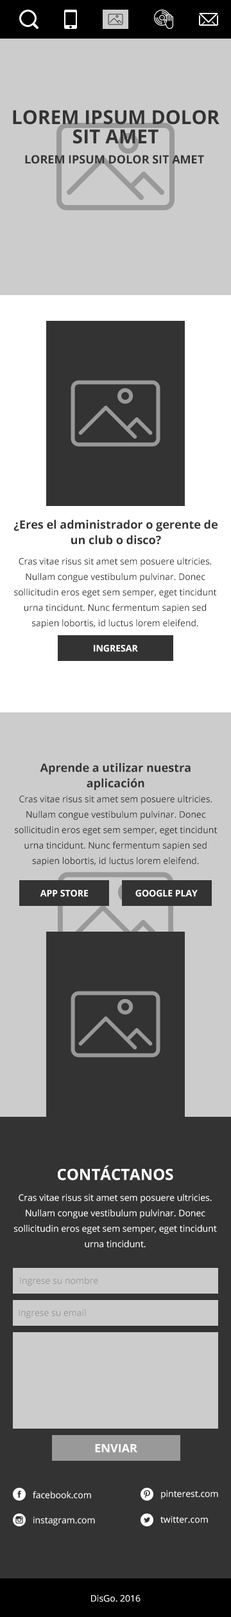
<style>
.page{position:relative;width:231px;height:1617px;background:#cccccc}
.page>*{position:absolute;margin:0}
.t1{font:19.3px/19.3px "OpenSans-Bold";color:#333333;text-transform:uppercase}
.t2{font:11.6px "OpenSans-Bold";color:#333333;text-transform:uppercase}
.t3{font:11.6px/15.4px "OpenSans-Bold";color:#333333}
.t4{font:9px/15.4px "OpenSans";color:#333333}
.t5{font:9px "OpenSans-Bold";color:#ffffff;text-transform:uppercase}
.t6{font:15.4px "OpenSans-Bold";color:#ffffff}
.t7{font:9px/15.4px "OpenSans";color:#ffffff}
.t8{font:9px "OpenSans";color:#999999}
.t9{font:11.6px "OpenSans-Bold";color:#ffffff;text-transform:uppercase}
.t10{font:9px "OpenSans";color:#ffffff}
</style>
<div class="page">
<p class="t1" style="left:13px;top:110px;width:207px;height:34px;text-align:center">Lorem ipsum dolor sit amet</p>
<p class="t2" style="left:25px;top:155px;width:179px;height:9px">Lorem ipsum dolor sit amet</p>
<p class="t3" style="left:13px;top:519px;width:205px;height:25px;text-align:center">¿Eres el administrador o gerente de un club o disco?</p>
<p class="t4" style="left:14px;top:557px;width:203px;height:72px;text-align:center">Cras vitae risus sit amet sem posuere ultricies. Nullam congue vestibulum pulvinar. Donec sollicitudin eros eget sem semper, eget tincidunt urna tincidunt. Nunc fermentum sapien sed sapien lobortis, id luctus lorem eleifend.</p>
<p class="t5" style="left:94px;top:645px;width:44px;height:7px">Ingresar</p>
<p class="t3" style="left:40px;top:762px;width:151px;height:28px;text-align:center">Aprende a utilizar nuestra aplicación</p>
<p class="t4" style="left:15px;top:795px;width:203px;height:71px;text-align:center">Cras vitae risus sit amet sem posuere ultricies. Nullam congue vestibulum pulvinar. Donec sollicitudin eros eget sem semper, eget tincidunt urna tincidunt. Nunc fermentum sapien sed sapien lobortis, id luctus lorem eleifend.</p>
<p class="t5" style="left:40px;top:890px;width:48px;height:7px">App Store</p>
<p class="t5" style="left:136px;top:890px;width:62px;height:7px">Google Play</p>
<p class="t6" style="left:58px;top:1165px;width:116px;height:15px">CONTÁCTANOS</p>
<p class="t7" style="left:14px;top:1194px;width:203px;height:53px;text-align:center">Cras vitae risus sit amet sem posuere ultricies. Nullam congue vestibulum pulvinar. Donec sollicitudin eros eget sem semper, eget tincidunt urna tincidunt.</p>
<p class="t8" style="left:20px;top:1277px;width:78px;height:9px">Ingrese su nombre</p>
<p class="t8" style="left:19px;top:1309px;width:67px;height:9px">Ingrese su email</p>
<p class="t9" style="left:95px;top:1444px;width:43px;height:8px">Enviar</p>
<p class="t10" style="left:33px;top:1491px;width:58px;height:7px">facebook.com</p>
<p class="t10" style="left:161px;top:1490px;width:58px;height:9px">pinterest.com</p>
<p class="t10" style="left:33px;top:1516px;width:62px;height:9px">instagram.com</p>
<p class="t10" style="left:161px;top:1516px;width:47px;height:7px">twitter.com</p>
<p class="t10" style="left:91px;top:1594px;width:50px;height:8px">DisGo. 2016</p>
</div>
